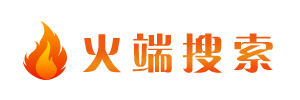
<style>
.page{position:relative;width:300px;height:100px;background:#ffffff}
.page>*{position:absolute;margin:0}
.t1{font:42px "FZCQJW--GB1-0";letter-spacing:0.2em;color:#f56f00}
</style>
<div class="page">
<p class="t1" style="left:83px;top:33px;width:190px;height:40px">火端搜索</p>
</div>
